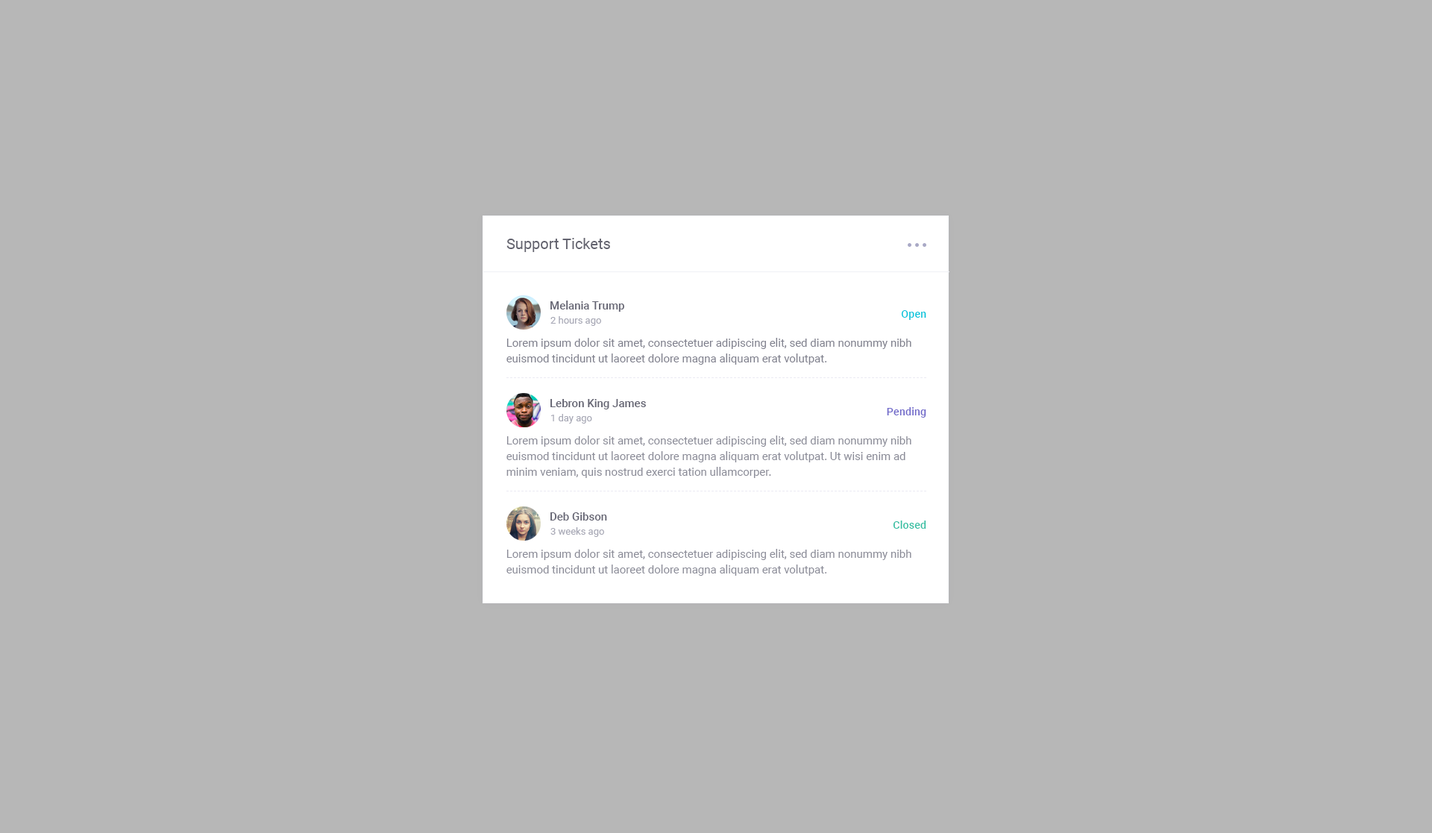
<style>
.page{position:relative;width:1432px;height:833px;background:#b7b7b7}
.page>*{position:absolute;margin:0}
.t1{font:14.9px "Roboto-Regular";color:#646470}
.t2{font:11.2px "Roboto-Medium";color:#666674}
.t3{font:9.7px "Roboto-Regular";color:#a8a9b6}
.t4{font:10.4px "Roboto-Medium";letter-spacing:0.02em;color:#00c5dc}
.t5{font:11.2px/15.7px "Roboto-Regular";color:#7f808d}
.t6{font:10.4px "Roboto-Medium";letter-spacing:0.02em;color:#716aca}
.t7{font:11.2px/15.7px "Roboto-Regular";color:#8b8c98}
.t8{font:10.4px "Roboto-Medium";letter-spacing:0.02em;color:#34bfa3}
</style>
<div class="page">
<p class="t1" style="left:506px;top:238px;width:104px;height:14px">Support Tickets</p>
<p class="t2" style="left:550px;top:301px;width:74px;height:11px">Melania Trump</p>
<p class="t3" style="left:550px;top:316px;width:51px;height:10px">2 hours ago</p>
<p class="t4" style="left:901px;top:310px;width:25px;height:10px">Open</p>
<p class="t5" style="left:506px;top:338px;width:405px;height:27px">Lorem ipsum dolor sit amet, consectetuer adipiscing elit, sed diam nonummy nibh euismod tincidunt ut laoreet dolore magna aliquam erat volutpat.</p>
<p class="t2" style="left:550px;top:399px;width:96px;height:10px">Lebron King James</p>
<p class="t3" style="left:551px;top:414px;width:41px;height:10px">1 day ago</p>
<p class="t6" style="left:887px;top:407px;width:39px;height:11px">Pending</p>
<p class="t7" style="left:506px;top:435px;width:405px;height:43px">Lorem ipsum dolor sit amet, consectetuer adipiscing elit, sed diam nonummy nibh euismod tincidunt ut laoreet dolore magna aliquam erat volutpat. Ut wisi enim ad minim veniam, quis nostrud exerci tation ullamcorper.</p>
<p class="t2" style="left:550px;top:512px;width:57px;height:8px">Deb Gibson</p>
<p class="t8" style="left:893px;top:520px;width:33px;height:9px">Closed</p>
<p class="t3" style="left:550px;top:527px;width:54px;height:10px">3 weeks ago</p>
<p class="t7" style="left:506px;top:549px;width:405px;height:27px">Lorem ipsum dolor sit amet, consectetuer adipiscing elit, sed diam nonummy nibh euismod tincidunt ut laoreet dolore magna aliquam erat volutpat.</p>
</div>
